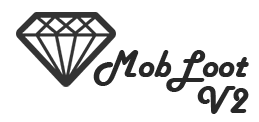
<style>
.page{position:relative;width:259px;height:122px;background:#ffffff}
.page>*{position:absolute;margin:0}
.t1{font:40px "HarlowSolid";color:#282828}
</style>
<div class="page">
<p class="t1" style="left:93px;top:50px;width:156px;height:42px">MobLoot</p>
<p class="t1" style="left:197px;top:86px;width:52px;height:28px">V2</p>
</div>
